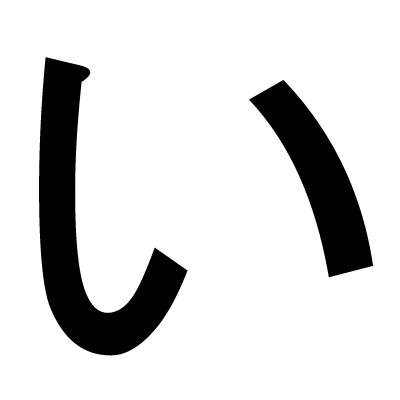
<style>
.page{position:relative;width:400px;height:400px;background:#ffffff}
.page>*{position:absolute;margin:0}
.t1{font:416.7px "MS-PGothic";color:#000000}
</style>
<div class="page">
<p class="t1" style="left:39px;top:57px;width:334px;height:299px">い</p>
</div>
